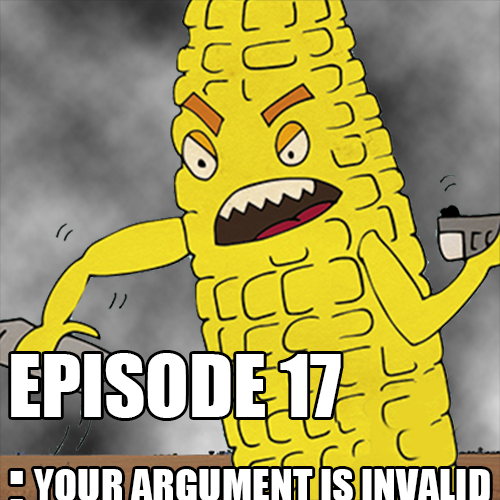
<style>
.page{position:relative;width:500px;height:500px}
.page>*{position:absolute;margin:0}
.t1{font:42.4px "Impact";color:#ffffff}
</style>
<div class="page">
<p class="t1" style="left:33px;top:469px;width:457px;height:33px">YOUR ARGUMENT IS INVALID</p>
</div>
